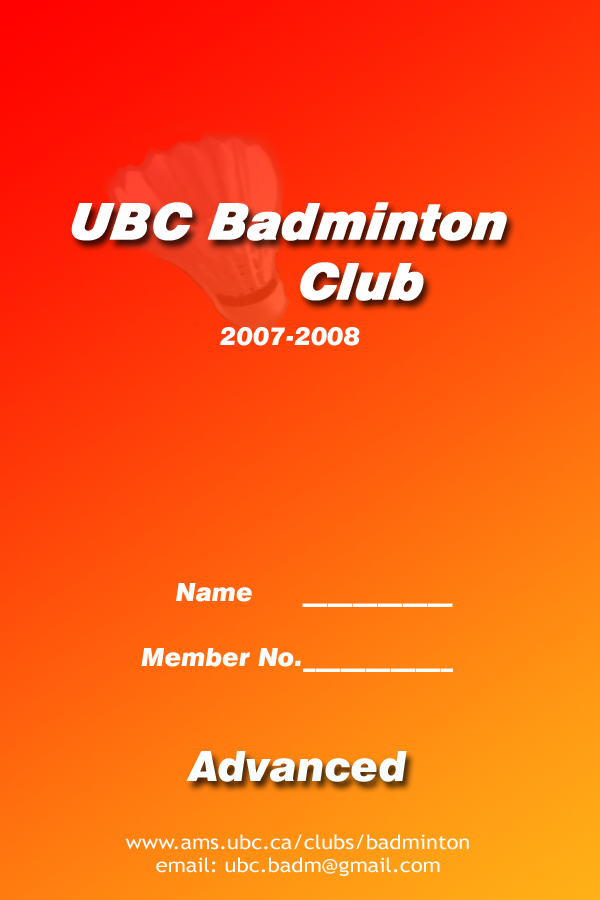
<style>
.page{position:relative;width:600px;height:900px}
.page>*{position:absolute;margin:0}
.t1{font:25px "Swiss721BT-BlackItalic";color:#f9fdfe}
.t2{font:41.7px "Swiss721BT-BlackItalic";color:#f9fdfe}
.t3{font:19.8px "TrebuchetMS";color:#f9fdfe;scale:1.1 1}
</style>
<div class="page">
<p class="t1" style="left:220px;top:327px;width:140px;height:19px">2007-2008</p>
<p class="t1" style="left:176px;top:583px;width:277px;height:24px">Name      ____________</p>
<p class="t1" style="left:141px;top:648px;width:312px;height:24px">Member No.____________</p>
<p class="t2" style="left:186px;top:751px;width:221px;height:31px">Advanced</p>
<p class="t3" style="left:125px;top:834px;width:344px;height:42px;text-align:center">www.ams.ubc.ca/clubs/badminton<br>email: ubc.badm@gmail.com</p>
</div>
